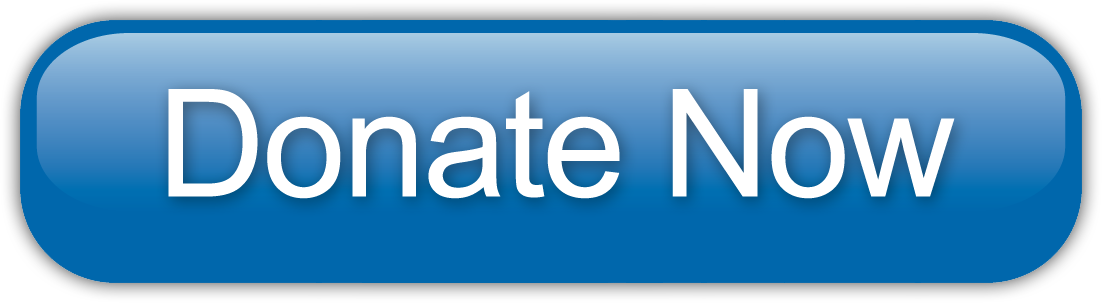
<style>
.page{position:relative;width:1102px;height:303px;background:#0067ac}
.page>*{position:absolute;margin:0}
.t1{font:150px "ArialMT";letter-spacing:-0.02em;color:#ffffff}
</style>
<div class="page">
<p class="t1" style="left:168px;top:89px;width:787px;height:110px">Donate Now</p>
</div>
